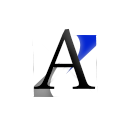
<style>
.page{position:relative;width:128px;height:128px;background:#ffffff}
.page>*{position:absolute;margin:0}
.t1{font:125px "DaunPenh";color:#000000}
</style>
<div class="page">
<p class="t1" style="left:34px;top:28px;width:62px;height:61px">A</p>
</div>
